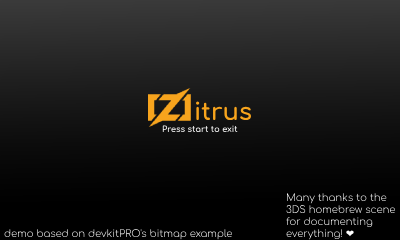
<style>
.page{position:relative;width:400px;height:240px}
.page>*{position:absolute;margin:0}
.t1{font:24px "Comfortaa-Bold";color:#f7a41d}
.t2{font:8.3px "Comfortaa-Bold";color:#ffffff}
.t3{font:10px "Comfortaa-Light";color:#ffffff}
.t4{font:10px "DejaVuSans";color:#ffffff}
.t5{font:10px "Comfortaa-Light"}
</style>
<div class="page">
<p class="t1" style="left:196px;top:101px;width:55px;height:19px">itrus</p>
<p class="t2" style="left:162px;top:125px;width:76px;height:7px">Press start to exit</p>
<p class="t3" style="left:286px;top:193px;width:110px;height:47px">Many thanks to the<br>3DS homebrew scene<br>for documenting<br>everything! <span class="t4">❤️</span></p>
<p class="t5" style="left:4px;top:229px;width:228px;height:11px">demo based on devkitPRO's bitmap example</p>
</div>
